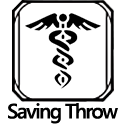
<style>
.page{position:relative;width:125px;height:125px;background:#ffffff}
.page>*{position:absolute;margin:0}
.t1{font:20.8px "SegoeUI-Semibold";letter-spacing:-0.075em;color:#000000}
</style>
<div class="page">
<p class="t1" style="left:8px;top:103px;width:110px;height:21px">Saving Throw</p>
</div>
